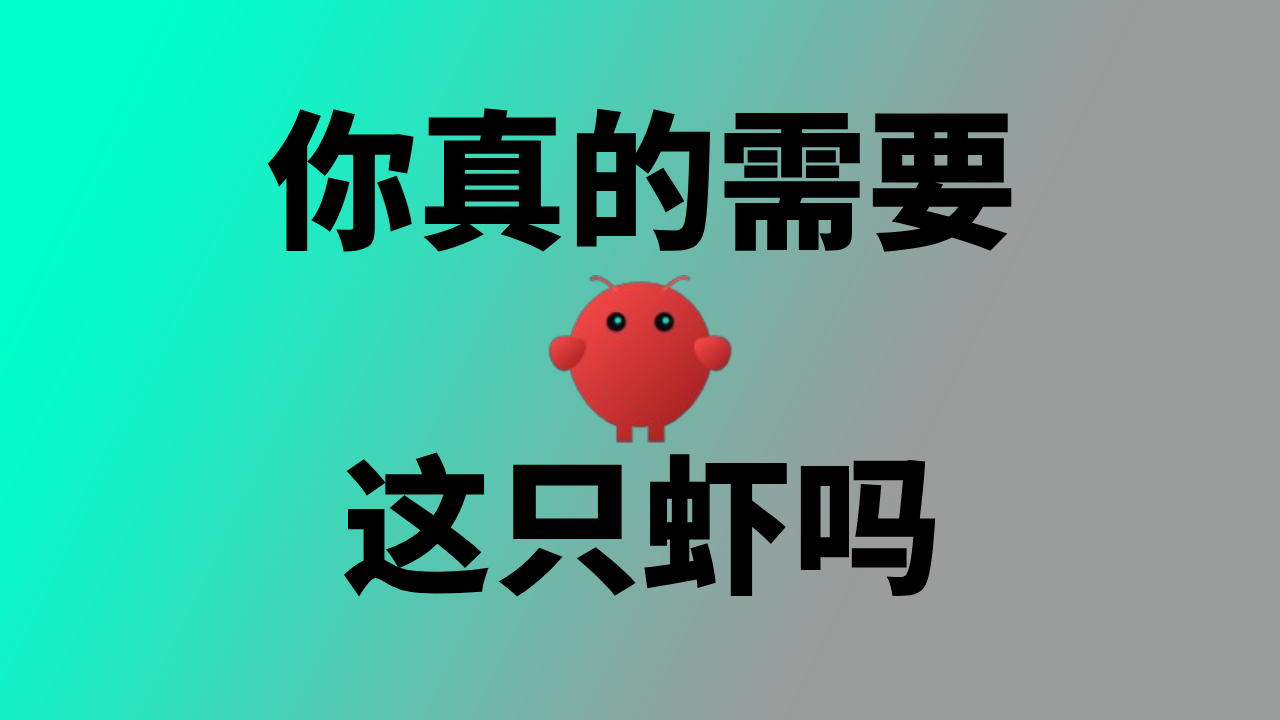
<style>
.page{position:relative;width:1280px;height:720px;background:#9b9c9c}
.page>*{position:absolute;margin:0}
.t1{font:150px "SourceHanSansSC-Heavy";color:#000000}
</style>
<div class="page">
<p class="t1" style="left:267px;top:108px;width:745px;height:144px">你真的需要</p>
<p class="t1" style="left:343px;top:452px;width:593px;height:145px">这只虾吗</p>
</div>
